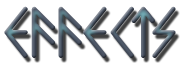
<style>
.page{position:relative;width:185px;height:64px;background:#ffffff}
.page>*{position:absolute;margin:0}
.t1{font:64px "ComicRunes"}
</style>
<div class="page">
<p class="t1" style="left:4px;top:6px;width:172px;height:52px">EFFECTS</p>
</div>
